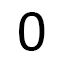
<style>
.page{position:relative;width:64px;height:64px;background:#ffffff}
.page>*{position:absolute;margin:0}
.t1{font:58.3px "Calibri";color:#000000}
</style>
<div class="page">
<p class="t1" style="left:19px;top:12px;width:26px;height:39px">0</p>
</div>
